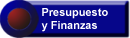
<style>
.page{position:relative;width:130px;height:38px;background:#06068a}
.page>*{position:absolute;margin:0}
.t1{font:11px "Arial-BoldMT";color:#ffffff}
</style>
<div class="page">
<p class="t1" style="left:41px;top:8px;width:67px;height:24px">Presupuesto<br>y Finanzas</p>
</div>
